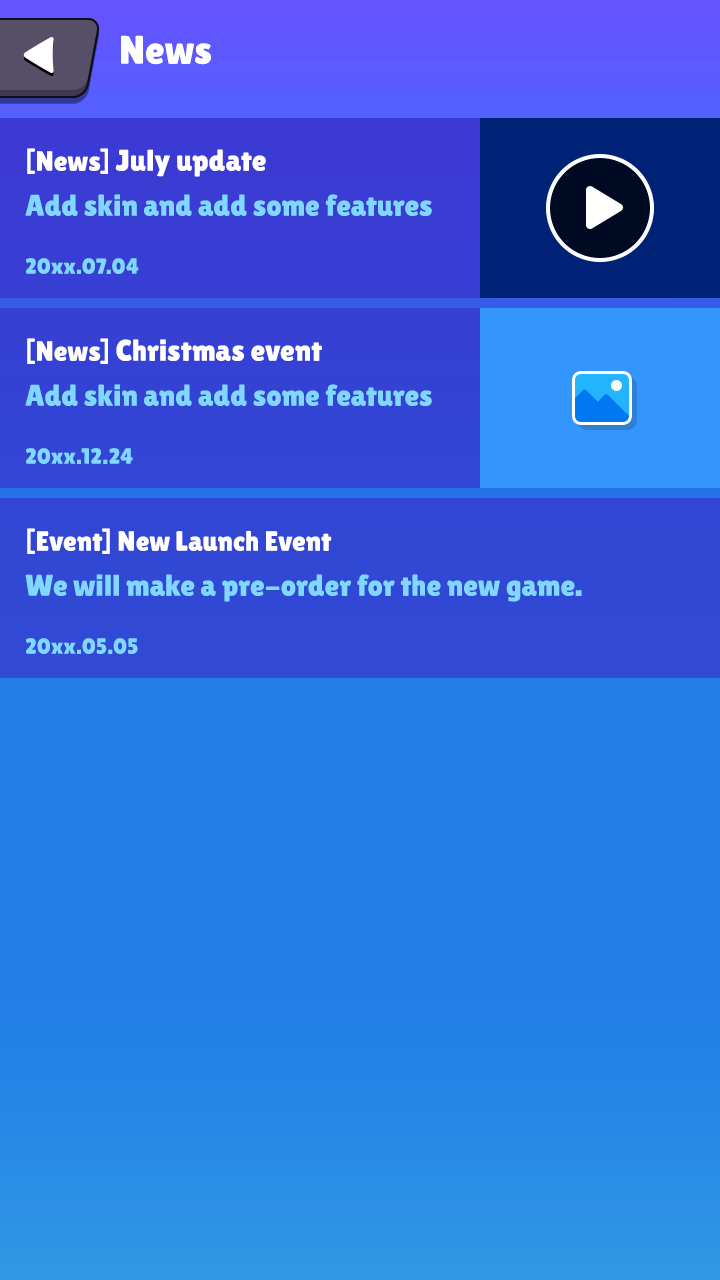
<style>
.page{position:relative;width:720px;height:1280px;background:#227de6}
.page>*{position:absolute;margin:0}
.t1{font:40px "LilitaOne";color:#ffffff}
.t2{font:30px "LilitaOne";color:#ffffff}
.t3{font:28px "LilitaOne";color:#ffffff}
.t4{font:30px "LilitaOne";color:#80d7ff}
.t5{font:22px "LilitaOne";color:#80d7ff}
</style>
<div class="page">
<p class="t1" style="left:121px;top:35px;width:90px;height:30px">News</p>
<p class="t2" style="left:27px;top:148px;width:239px;height:29px"><span class="t3">[News] </span>July update</p>
<p class="t4" style="left:25px;top:194px;width:407px;height:22px">Add skin and add some features</p>
<p class="t5" style="left:26px;top:258px;width:113px;height:16px">20xx.07.04</p>
<p class="t2" style="left:27px;top:338px;width:295px;height:26px"><span class="t3">[News] </span>Christmas event</p>
<p class="t4" style="left:25px;top:384px;width:407px;height:22px">Add skin and add some features</p>
<p class="t5" style="left:26px;top:448px;width:107px;height:16px">20xx.12.24</p>
<p class="t3" style="left:27px;top:528px;width:305px;height:26px">[Event] New Launch Event</p>
<p class="t4" style="left:25px;top:574px;width:557px;height:28px">We will make a pre-order for the new game.</p>
<p class="t5" style="left:26px;top:638px;width:112px;height:16px">20xx.05.05</p>
</div>
